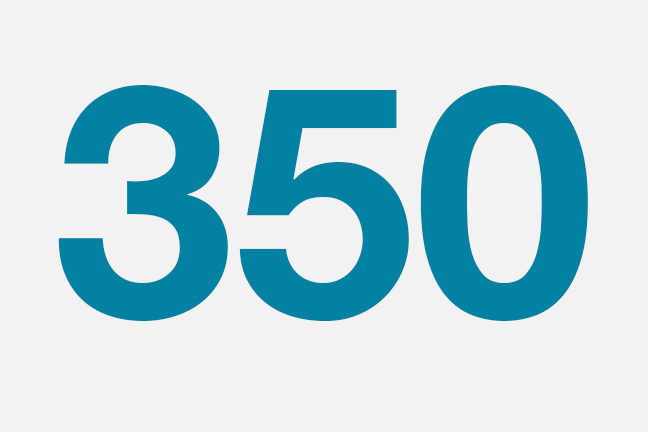
<style>
.page{position:relative;width:648px;height:432px;background:#f2f2f2}
.page>*{position:absolute;margin:0}
.t1{font:325px "HelveticaNeue-Bold";color:#0381a2}
</style>
<div class="page">
<p class="t1" style="left:58px;top:85px;width:530px;height:236px">350</p>
</div>
